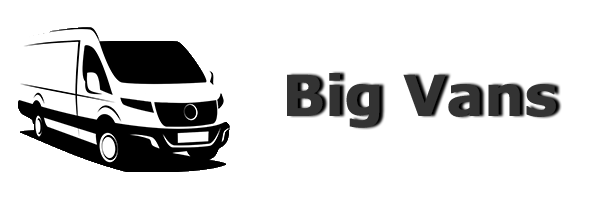
<style>
.page{position:relative;width:600px;height:200px;background:#ffffff}
.page>*{position:absolute;margin:0}
.t1{font:56.5px "Verdana-Bold";color:#333333}
</style>
<div class="page">
<p class="t1" style="left:287px;top:73px;width:269px;height:55px">Big Vans</p>
</div>
